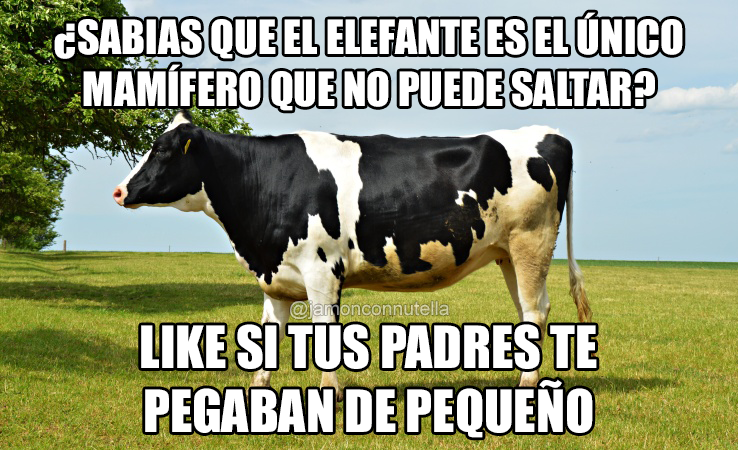
<style>
.page{position:relative;width:738px;height:450px}
.page>*{position:absolute;margin:0}
.t1{font:43.4px "Impact";color:#ffffff}
.t2{font:19.3px "ArialMT";color:#cfce9d}
.t3{font:53.6px "Impact";color:#ffffff}
</style>
<div class="page">
<p class="t1" style="left:54px;top:12px;width:629px;height:99px;text-align:center">¿SABIAS QUE EL ELEFANTE ES EL ÚNICO <br>MAMÍFERO QUE NO PUEDE SALTAR?</p>
<p class="t2" style="left:290px;top:301px;width:159px;height:18px">@jamonconnutella</p>
<p class="t3" style="left:141px;top:324px;width:456px;height:114px;text-align:center">LIKE SI TUS PADRES TE<br>PEGABAN DE PEQUEÑO</p>
</div>
